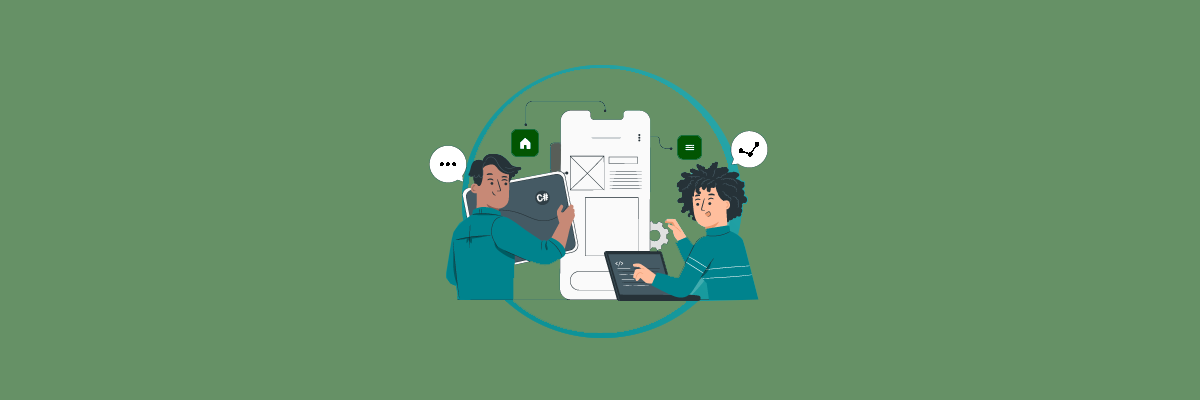
<style>
.page{position:relative;width:1200px;height:400px;background:#669166}
.page>*{position:absolute;margin:0}
.t1{font:10px "FranklinGothic-Medium";color:#fefffe}
</style>
<div class="page">
<p class="t1" style="left:536px;top:193px;width:13px;height:9px;rotate:-15deg">C#</p>
</div>
